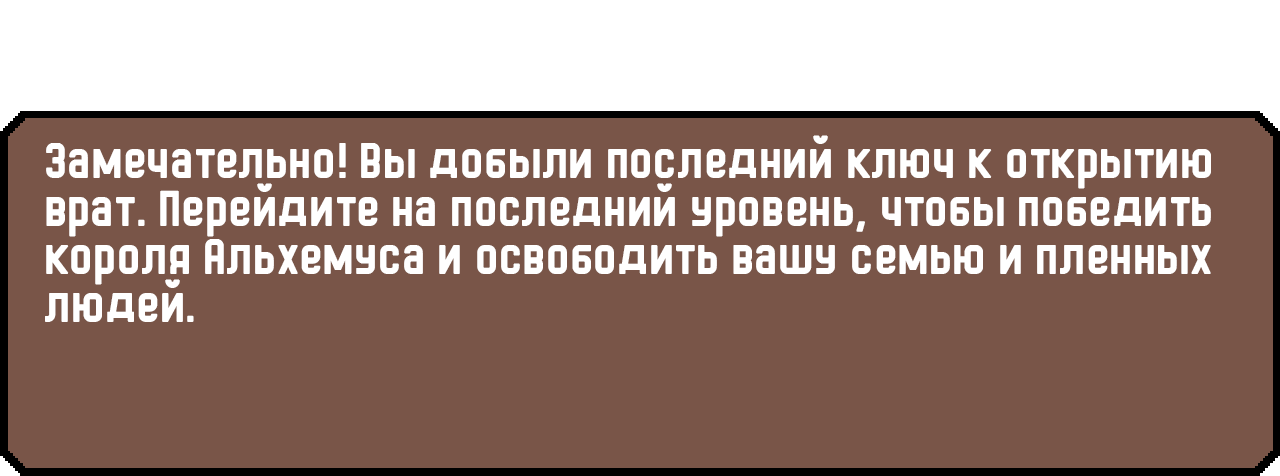
<style>
.page{position:relative;width:1280px;height:476px;background:#795548}
.page>*{position:absolute;margin:0}
.t1{font:48px/48px "HermanoMayor";color:#ffffff}
</style>
<div class="page">
<p class="t1" style="left:45px;top:135px;width:1166px;height:187px">Замечательно! Вы добыли последний ключ к открытию врат. Перейдите на последний уровень, чтобы победить короля Альхемуса и освободить вашу семью и пленных людей.</p>
</div>
